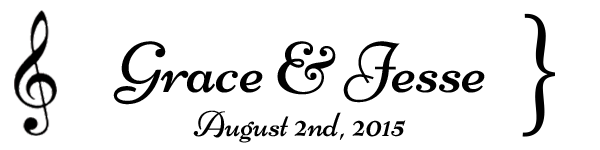
<style>
.page{position:relative;width:600px;height:150px;background:#ffffff}
.page>*{position:absolute;margin:0}
.t1{font:150px "Gabriola";letter-spacing:-0.005em;color:#000000}
.t2{font:72px "Niconne-Regular";letter-spacing:-0.005em;color:#000000}
.t3{font:36px "Niconne-Regular";letter-spacing:-0.005em;color:#000000}
</style>
<div class="page">
<p class="t1" style="left:522px;top:13px;width:33px;height:124px">}</p>
<p class="t2" style="left:113px;top:41px;width:372px;height:64px">Grace &amp; Jesse</p>
<p class="t3" style="left:193px;top:110px;width:213px;height:33px">August 2nd, 2015</p>
</div>
